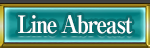
<style>
.page{position:relative;width:150px;height:48px}
.page>*{position:absolute;margin:0}
.t1{font:24px "RyuminPro-ExBold";letter-spacing:-0.08em;color:#ffffff;scale:0.9 1}
</style>
<div class="page">
<p class="t1" style="left:18px;top:15px;width:115px;height:19px">Line Abreast</p>
</div>
